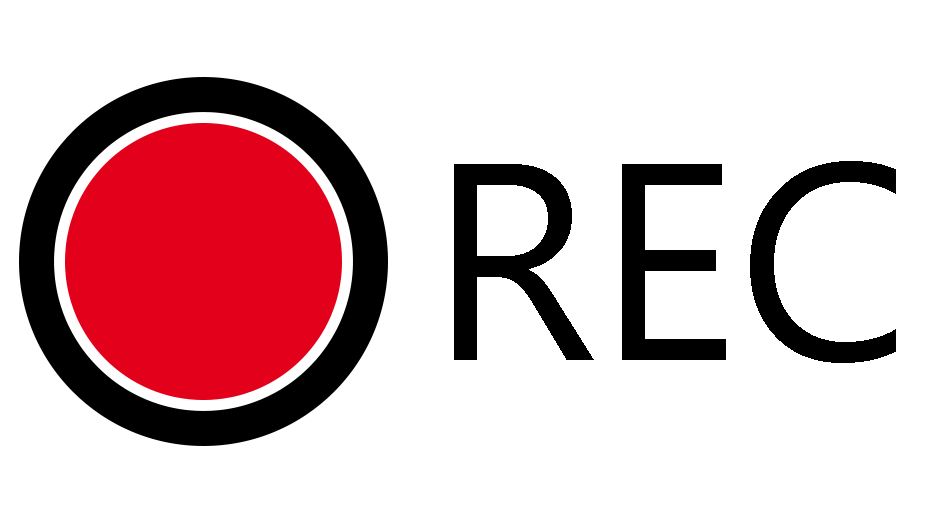
<style>
.page{position:relative;width:932px;height:524px;background:#ffffff}
.page>*{position:absolute;margin:0}
.t1{font:280px "SegoeUI";color:#000000}
</style>
<div class="page">
<p class="t1" style="left:454px;top:161px;width:442px;height:202px">REC</p>
</div>
